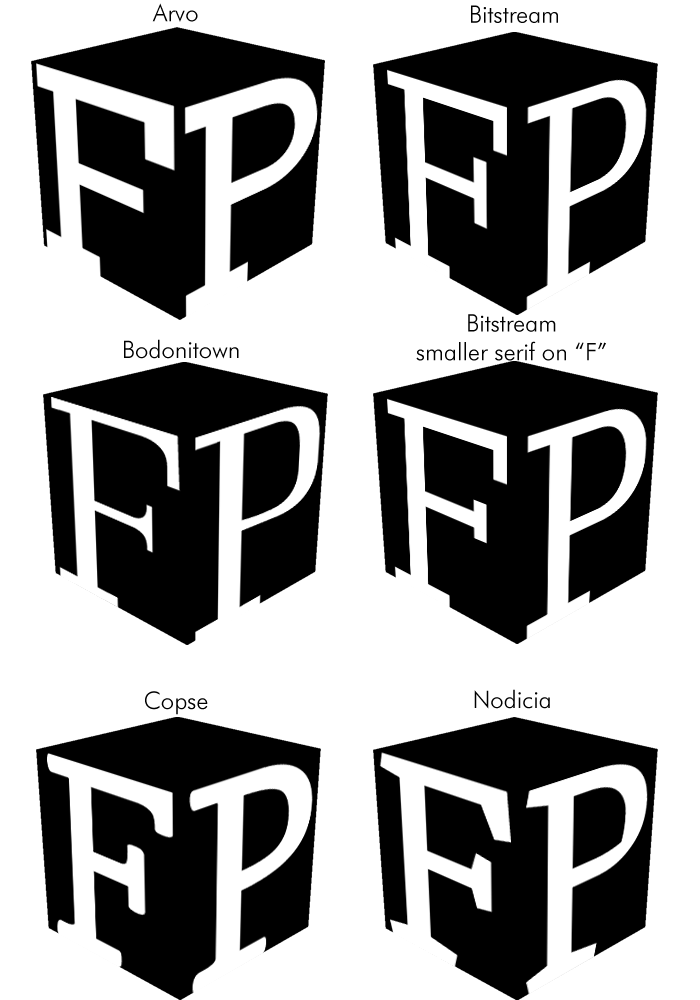
<style>
.page{position:relative;width:700px;height:1000px;background:#ffffff}
.page>*{position:absolute;margin:0}
.t1{font:24px "FuturaBT-Light";color:#000000}
</style>
<div class="page">
<p class="t1" style="left:152px;top:3px;width:46px;height:19px">Arvo</p>
<p class="t1" style="left:471px;top:5px;width:87px;height:18px">Bitstream</p>
<p class="t1" style="left:416px;top:314px;width:190px;height:47px;text-align:center">Bitstream<br>smaller serif on “F”</p>
<p class="t1" style="left:124px;top:339px;width:115px;height:20px">Bodonitown</p>
<p class="t1" style="left:474px;top:689px;width:76px;height:20px">Nodicia</p>
<p class="t1" style="left:145px;top:691px;width:63px;height:24px">Copse</p>
</div>
